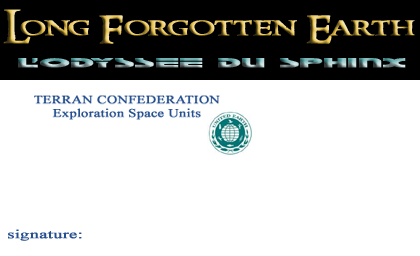
<style>
.page{position:relative;width:420px;height:256px;background:#ffffff}
.page>*{position:absolute;margin:0}
.t1{font:24px "RingbearerMedium";font-weight:bold;scale:1.5 1}
.t2{font:32px "RingbearerMedium";font-weight:bold;scale:1.5 1}
.t3{font:28px "Galant";font-weight:bold;scale:1.5 1}
.t4{font:12px "TimesNewRomanPSMT";color:#254f8e;font-weight:bold;scale:1.5 1}
</style>
<div class="page">
<p class="t1" style="left:3px;top:9px;width:412px;height:35px"><span class="t2">L</span>ong <span class="t2">F</span>orgotten <span class="t2">E</span>arth</p>
<p class="t3" style="left:18px;top:58px;width:388px;height:10px">L'ODYSSEE DU Sphinx</p>
<p class="t4" style="left:8px;top:229px;width:74px;height:12px">signature:</p>
</div>
